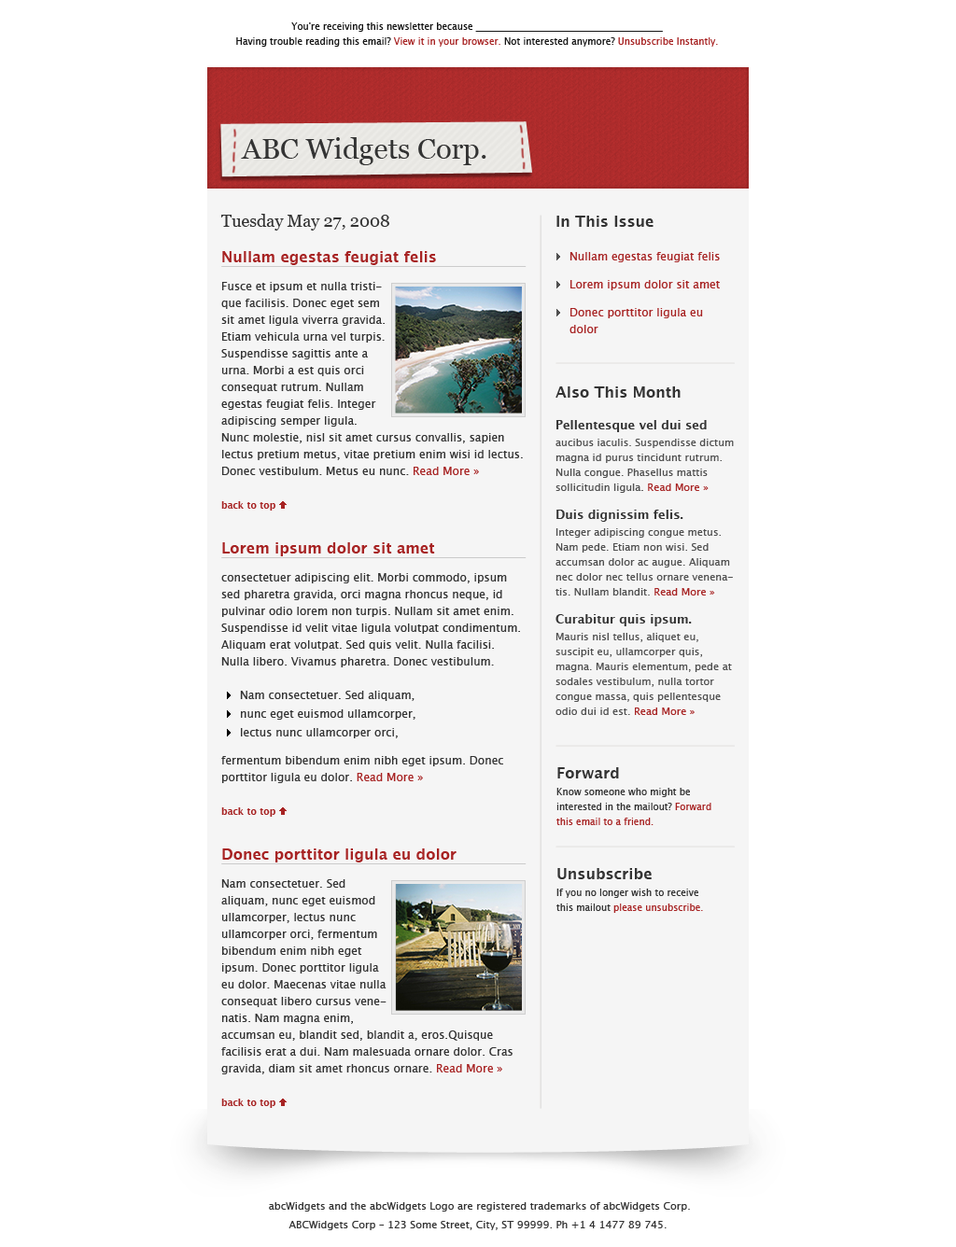
<style>
.page{position:relative;width:956px;height:1247px;background:#ffffff}
.page>*{position:absolute;margin:0}
.t1{font:9.3px/14.9px "LucidaGrande";color:#151515}
.t2{font:9.3px/14.9px "LucidaGrande";color:#a72323}
.t3{font:28.9px "Georgia";color:#333333}
.t4{font:11.2px/16.8px "LucidaGrande";color:#333333}
.t5{font:16.8px/26.1px "Georgia";color:#333333}
.t6{font:14.9px/16.8px "LucidaGrande-Bold";color:#a72323}
.t7{font:11.2px/16.8px "LucidaGrande";color:#a72323}
.t8{font:9.3px/16.8px "LucidaGrande-Bold";color:#a72323}
.t9{font:14.9px/16.8px "LucidaGrande-Bold";color:#333333}
.t10{font:10.3px/14.9px "LucidaGrande";color:#505050}
.t11{font:12.1px/14.9px "LucidaGrande-Bold";color:#333333}
.t12{font:10.3px/14.9px "LucidaGrande";color:#333333}
.t13{font:10.3px/14.9px "LucidaGrande";color:#a72323}
.t14{font:9.3px/14.9px "LucidaGrande";color:#333333}
.t15{font:14.9px/26.1px "LucidaGrande-Bold";color:#333333}
</style>
<div class="page">
<p class="t1" style="left:236px;top:22px;width:482px;height:25px;text-align:center">You're receiving this newsletter because ________________________________________<br>Having trouble reading this email? <span class="t2">View it in your browser.</span> Not interested anymore?<span class="t2"> Unsubscribe Instantly.</span></p>
<p class="t3" style="left:241px;top:137px;width:245px;height:28px">ABC Widgets Corp.</p>
<p class="t4" style="left:221px;top:214px;width:302px;height:297px"><span class="t5">Tuesday May 27, 2008</span><span class="t6"><br>Nullam egestas feugiat felis<br></span>Fusce et ipsum et nulla tristi-<br>que facilisis. Donec eget sem <br>sit amet ligula viverra gravida. <br>Etiam vehicula urna vel turpis. <br>Suspendisse sagittis ante a <br>urna. Morbi a est quis orci <br>consequat rutrum. Nullam <br>egestas feugiat felis. Integer <br>adipiscing semper ligula. <br>Nunc molestie, nisl sit amet cursus convallis, sapien lectus pretium metus, vitae pretium enim wisi id lectus. Donec vestibulum. Metus eu nunc. <span class="t7">Read More »<br></span><span class="t8">back to top</span></p>
<p class="t7" style="left:556px;top:216px;width:164px;height:117px"><span class="t9">In This Issue <br></span>Nullam egestas feugiat felis<br>Lorem ipsum dolor sit amet<br>Donec porttitor ligula eu dolor</p>
<p class="t10" style="left:555px;top:387px;width:179px;height:328px"><span class="t9">Also This Month<br></span><span class="t11">Pellentesque vel dui sed<br></span>aucibus iaculis. Suspendisse dictum magna id purus tincidunt rutrum. Nulla congue. Phasellus mattis sollicitudin ligula<span class="t12">. </span><span class="t13">Read More »<br></span><span class="t11">Duis dignissim felis.<br></span>Integer adipiscing congue metus. Nam pede. Etiam non wisi. Sed accumsan dolor ac augue. Aliquam nec dolor nec tellus ornare venenatis. Nullam blandit. <span class="t13">Read More »<br></span><span class="t11">Curabitur quis ipsum.<br></span>Mauris nisl tellus, aliquet eu, suscipit eu, ullamcorper quis, magna. Mauris elementum, pede at sodales vestibulum, nulla tortor congue massa, quis pellentesque odio dui id est. <span class="t13">Read More »</span></p>
<p class="t4" style="left:221px;top:542px;width:299px;height:275px"><span class="t6">Lorem ipsum dolor sit amet<br></span>consectetuer adipiscing elit. Morbi commodo, ipsum sed pharetra gravida, orci magna rhoncus neque, id pulvinar odio lorem non turpis. Nullam sit amet enim. Suspendisse id velit vitae ligula volutpat condimentum. Aliquam erat volutpat. Sed quis velit. Nulla facilisi. Nulla libero. Vivamus pharetra. Donec vestibulum. <br>Nam consectetuer. Sed aliquam, <br>nunc eget euismod ullamcorper, <br>lectus nunc ullamcorper orci, <br>fermentum bibendum enim nibh eget ipsum. Donec porttitor ligula eu dolor. <span class="t7">Read More »<br></span><span class="t8">back to top</span></p>
<p class="t14" style="left:556px;top:767px;width:155px;height:58px"><span class="t15">Forward<br></span>Know someone who might be <br>interested in the mailout? <span class="t2">Forward this email to a friend.</span></p>
<p class="t4" style="left:221px;top:849px;width:292px;height:259px"><span class="t6">Donec porttitor ligula eu dolor<br></span>Nam consectetuer. Sed <br>aliquam, nunc eget euismod <br>ullamcorper, lectus nunc <br>ullamcorper orci, fermentum <br>bibendum enim nibh eget <br>ipsum. Donec porttitor ligula <br>eu dolor. Maecenas vitae nulla <br>consequat libero cursus vene-<br>natis. Nam magna enim, <br>accumsan eu, blandit sed, blandit a, eros.Quisque facilisis erat a dui. Nam malesuada ornare dolor. Cras gravida, diam sit amet rhoncus ornare. <span class="t7">Read More »<br></span><span class="t8">back to top</span></p>
<p class="t14" style="left:556px;top:868px;width:147px;height:45px"><span class="t15">Unsubscribe<br></span>If you no longer wish to receive this mailout <span class="t2">please unsubscribe.</span></p>
<p class="t12" style="left:269px;top:1202px;width:421px;height:28px;text-align:center">abcWidgets and the abcWidgets Logo are registered trademarks of abcWidgets Corp. <br>ABCWidgets Corp – 123 Some Street, City, ST 99999. Ph +1 4 1477 89 745.</p>
</div>
